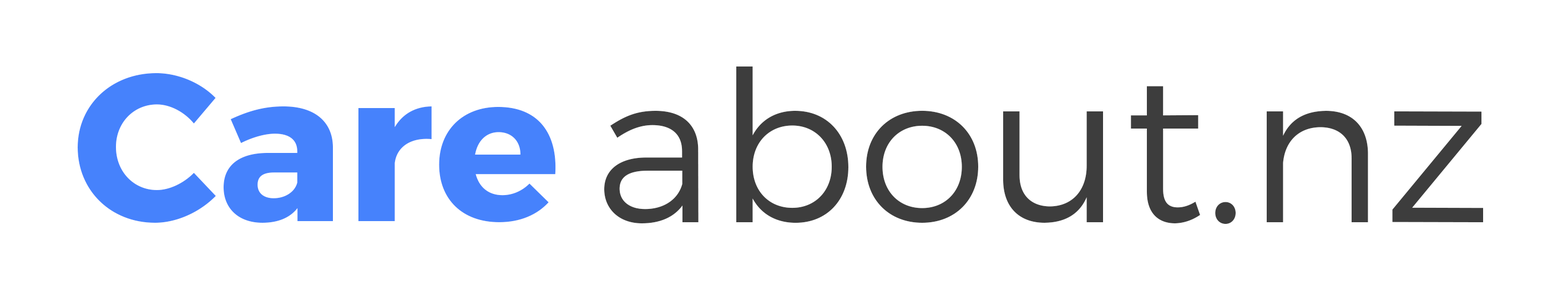
<style>
.page{position:relative;width:1568px;height:307px;background:#ffffff}
.page>*{position:absolute;margin:0}
.t1{font:210.1px "Montserrat-Bold";color:#4682fc}
.t2{font:210.1px "Montserrat-Light";color:#3d3d3d}
</style>
<div class="page">
<p class="t1" style="left:78px;top:73px;width:478px;height:150px">Care</p>
<p class="t2" style="left:604px;top:67px;width:879px;height:158px">about.nz</p>
</div>
